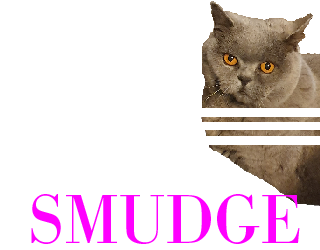
<style>
.page{position:relative;width:320px;height:250px;background:#ffffff}
.page>*{position:absolute;margin:0}
.t1{font:72px "BodoniURW-Reg";color:#ff00ff}
</style>
<div class="page">
<p class="t1" style="left:31px;top:194px;width:269px;height:50px">SMUDGE</p>
</div>
